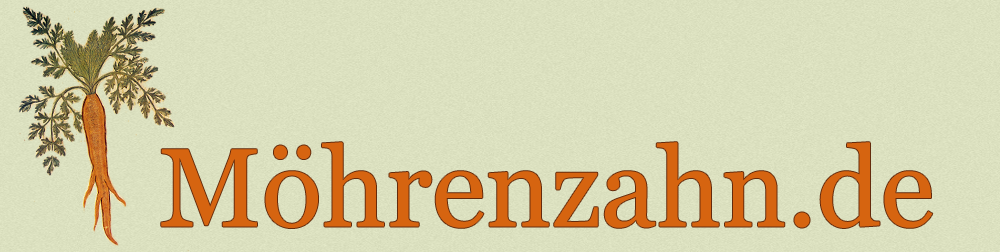
<style>
.page{position:relative;width:1000px;height:252px}
.page>*{position:absolute;margin:0}
.t1{font:111.1px "Georgia";color:#d66410}
</style>
<div class="page">
<p class="t1" style="left:161px;top:142px;width:772px;height:86px">Möhrenzahn.de</p>
</div>
